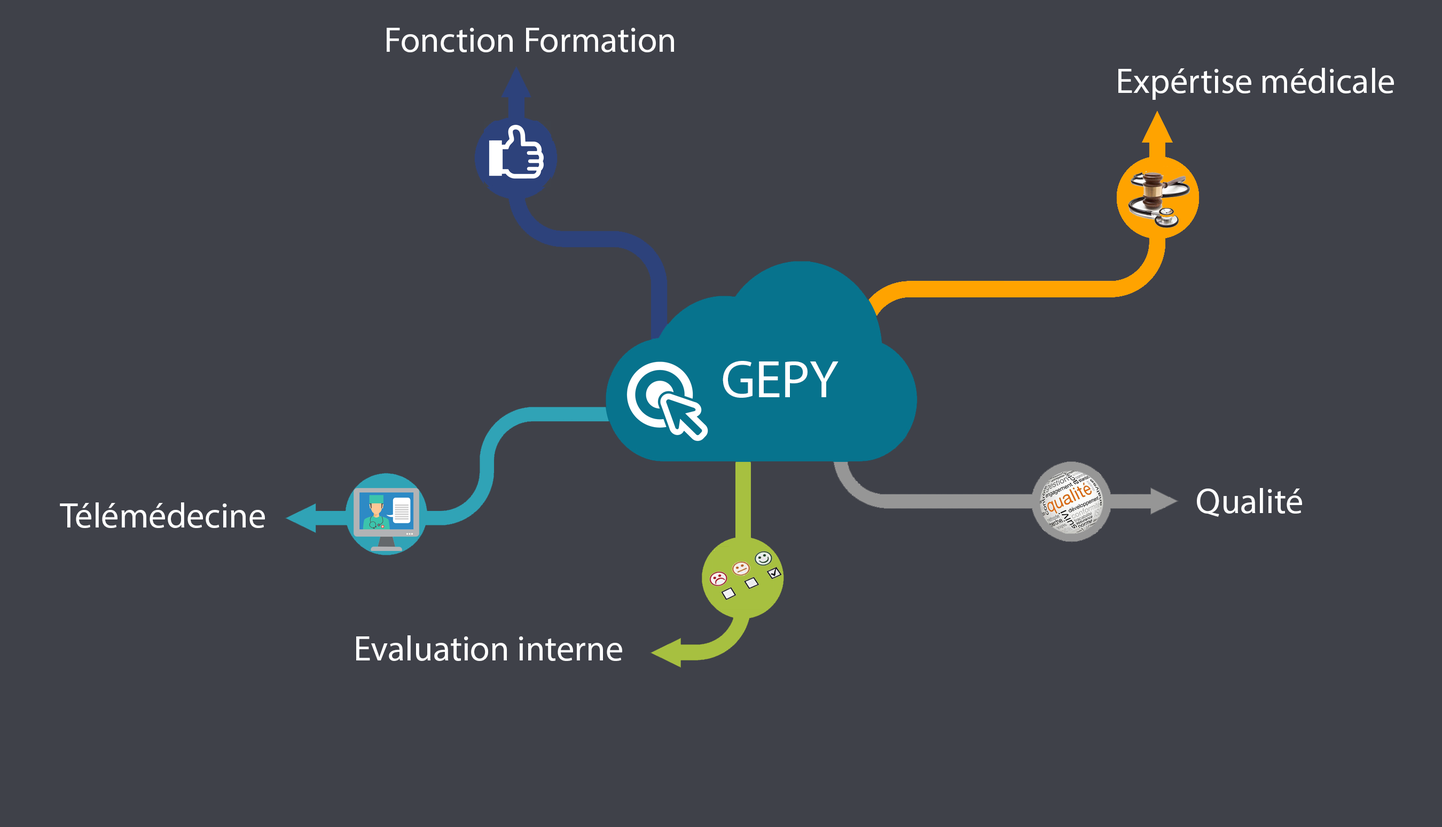
<style>
.page{position:relative;width:1442px;height:827px;background:#3f4149}
.page>*{position:absolute;margin:0}
.t1{font:35.6px "MyriadPro-Regular";color:#fefefe}
.t2{font:53.4px "MyriadPro-Regular";color:#ffffff}
.t3{font:35.6px "MyriadPro-Regular";color:#ffffff}
</style>
<div class="page">
<p class="t1" style="left:387px;top:28px;width:287px;height:24px">Fonction Formation</p>
<p class="t1" style="left:1118px;top:68px;width:276px;height:32px">Expértise médicale</p>
<p class="t2" style="left:722px;top:361px;width:116px;height:37px">GEPY</p>
<p class="t1" style="left:1197px;top:488px;width:105px;height:29px">Qualité</p>
<p class="t3" style="left:60px;top:502px;width:205px;height:26px">Télémédecine</p>
<p class="t3" style="left:356px;top:635px;width:266px;height:26px">Evaluation interne</p>
</div>
